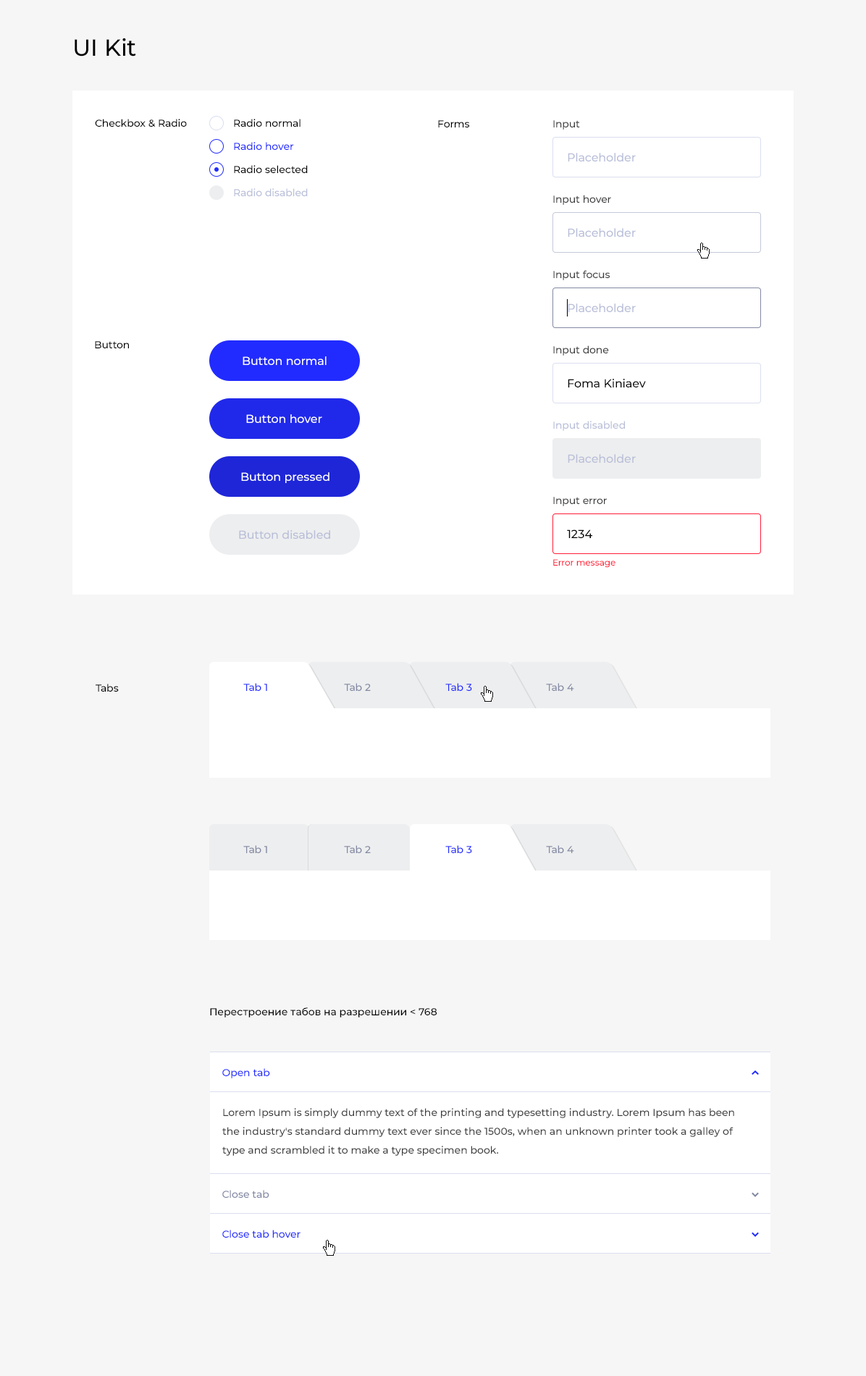
<style>
.page{position:relative;width:866px;height:1376px;background:#f6f6f6}
.page>*{position:absolute;margin:0}
.t1{font:23.2px "Montserrat-Medium";color:#000000}
.t2{font:10.1px "Montserrat-Medium";color:#000000}
.t3{font:10.1px "Montserrat-Medium";color:#3f3f3f}
.t4{font:10.1px "Montserrat-Medium";color:#212bff}
.t5{font:11.6px "Montserrat-Medium";color:#b8bed8}
.t6{font:10.1px "Montserrat-Medium";color:#b8bed8}
.t7{font:11.6px "Montserrat-Medium";color:#ffffff}
.t8{font:11.6px "Montserrat-Medium";color:#000000}
.t9{font:8.7px "Montserrat-Medium";color:#ff1e38}
.t10{font:10.1px "Montserrat-Medium";color:#8288a2}
.t11{font:10.1px/18.8px "Montserrat-Medium";color:#3f3f3f}
</style>
<div class="page">
<p class="t1" style="left:75px;top:38px;width:61px;height:19px">UI Kit</p>
<p class="t2" style="left:95px;top:119px;width:92px;height:8px">Checkbox &amp; Radio</p>
<p class="t2" style="left:234px;top:119px;width:67px;height:8px">Radio normal</p>
<p class="t2" style="left:438px;top:120px;width:31px;height:7px">Forms</p>
<p class="t3" style="left:553px;top:120px;width:27px;height:10px">Input</p>
<p class="t4" style="left:234px;top:142px;width:60px;height:8px">Radio hover</p>
<p class="t5" style="left:568px;top:153px;width:68px;height:9px">Placeholder</p>
<p class="t2" style="left:234px;top:165px;width:74px;height:8px">Radio selected</p>
<p class="t6" style="left:234px;top:188px;width:74px;height:8px">Radio disabled</p>
<p class="t3" style="left:553px;top:195px;width:58px;height:10px">Input hover</p>
<p class="t5" style="left:568px;top:228px;width:68px;height:9px">Placeholder</p>
<p class="t3" style="left:553px;top:270px;width:57px;height:10px">Input focus</p>
<p class="t5" style="left:568px;top:304px;width:68px;height:8px">Placeholder</p>
<p class="t2" style="left:95px;top:341px;width:34px;height:7px">Button</p>
<p class="t3" style="left:553px;top:346px;width:56px;height:10px">Input done</p>
<p class="t7" style="left:243px;top:356px;width:84px;height:9px">Button normal</p>
<p class="t8" style="left:568px;top:379px;width:78px;height:9px">Foma Kiniaev</p>
<p class="t7" style="left:246px;top:414px;width:76px;height:9px">Button hover</p>
<p class="t6" style="left:553px;top:421px;width:72px;height:10px">Input disabled</p>
<p class="t5" style="left:568px;top:454px;width:68px;height:9px">Placeholder</p>
<p class="t7" style="left:241px;top:472px;width:89px;height:11px">Button pressed</p>
<p class="t3" style="left:553px;top:497px;width:54px;height:9px">Input error</p>
<p class="t5" style="left:239px;top:530px;width:91px;height:9px">Button disabled</p>
<p class="t8" style="left:567px;top:530px;width:26px;height:9px">1234</p>
<p class="t9" style="left:553px;top:559px;width:63px;height:9px">Error message</p>
<p class="t2" style="left:96px;top:684px;width:23px;height:8px">Tabs</p>
<p class="t4" style="left:243px;top:683px;width:24px;height:8px">Tab 1</p>
<p class="t10" style="left:344px;top:683px;width:27px;height:8px">Tab 2</p>
<p class="t4" style="left:446px;top:683px;width:26px;height:8px">Tab 3</p>
<p class="t10" style="left:546px;top:683px;width:28px;height:8px">Tab 4</p>
<p class="t10" style="left:243px;top:845px;width:24px;height:8px">Tab 1</p>
<p class="t10" style="left:344px;top:845px;width:27px;height:8px">Tab 2</p>
<p class="t4" style="left:446px;top:845px;width:26px;height:8px">Tab 3</p>
<p class="t10" style="left:546px;top:845px;width:28px;height:8px">Tab 4</p>
<p class="t2" style="left:210px;top:1008px;width:228px;height:10px">Перестроение табов на разрешении &lt; 768</p>
<p class="t4" style="left:222px;top:1068px;width:48px;height:11px">Open tab</p>
<p class="t11" style="left:222px;top:1108px;width:513px;height:48px">Lorem Ipsum is simply dummy text of the printing and typesetting industry. Lorem Ipsum has been the industry's standard dummy text ever since the 1500s, when an unknown printer took a galley of type and scrambled it to make a type specimen book.</p>
<p class="t10" style="left:222px;top:1190px;width:47px;height:8px">Close tab</p>
<p class="t4" style="left:222px;top:1230px;width:79px;height:8px">Close tab hover</p>
</div>
